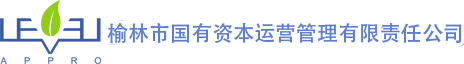
<style>
.page{position:relative;width:464px;height:64px;background:#ffffff}
.page>*{position:absolute;margin:0}
.t1{font:21px "AdobeHeitiStd-Regular";color:#5f7fcb}
</style>
<div class="page">
<p class="t1" style="left:107px;top:22px;width:355px;height:22px">榆林市国有资本运营管理有限责任公司</p>
</div>
